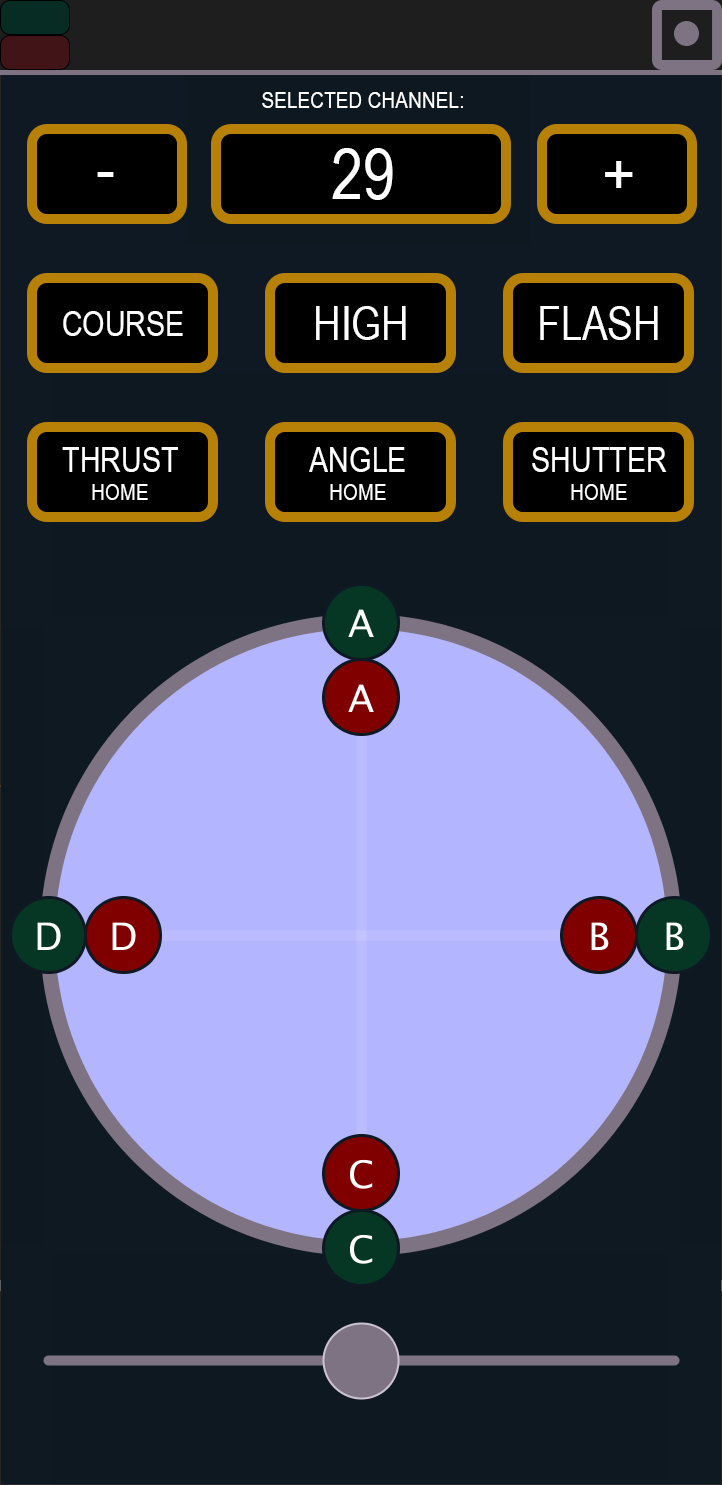
<style>
.page{position:relative;width:722px;height:1485px;background:#0e1821}
.page>*{position:absolute;margin:0}
.t1{font:23.3px "ArialNarrow";color:#ffffff}
.t2{font:70px "ArialNarrow";color:#ffffff}
.t3{font:35px "ArialNarrow";color:#ffffff}
.t4{font:46.7px "ArialNarrow";color:#ffffff}
</style>
<div class="page">
<p class="t1" style="left:262px;top:92px;width:201px;height:16px">SELECTED CHANNEL:</p>
<p class="t2" style="left:332px;top:148px;width:61px;height:52px">29</p>
<p class="t2" style="left:605px;top:161px;width:28px;height:27px">+</p>
<p class="t2" style="left:97px;top:172px;width:17px;height:5px">-</p>
<p class="t3" style="left:63px;top:311px;width:120px;height:25px">COURSE</p>
<p class="t4" style="left:316px;top:306px;width:90px;height:34px">HIGH</p>
<p class="t4" style="left:540px;top:306px;width:118px;height:34px">FLASH</p>
<p class="t3" style="left:62px;top:447px;width:116px;height:53px;text-align:center">THRUST<br><span class="t1">HOME</span></p>
<p class="t3" style="left:309px;top:447px;width:96px;height:53px;text-align:center">ANGLE<br><span class="t1">HOME</span></p>
<p class="t3" style="left:532px;top:447px;width:135px;height:53px;text-align:center">SHUTTER<br><span class="t1">HOME</span></p>
</div>
